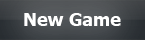
<style>
.page{position:relative;width:145px;height:40px}
.page>*{position:absolute;margin:0}
.t1{font:18px "Tahoma-Bold";color:#ffffff}
</style>
<div class="page">
<p class="t1" style="left:24px;top:13px;width:97px;height:13px">New Game</p>
</div>
